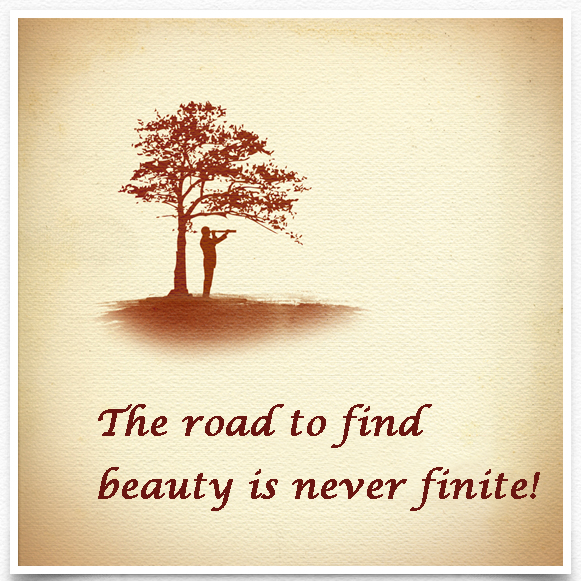
<style>
.page{position:relative;width:581px;height:581px}
.page>*{position:absolute;margin:0}
.t1{font:36px "LucidaCalligraphy-Italic";color:#6b1611;font-weight:bold}
</style>
<div class="page">
<p class="t1" style="left:98px;top:404px;width:442px;height:107px">The road to find<br>beauty is never finite!</p>
</div>
